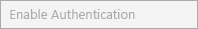
<style>
.page{position:relative;width:198px;height:29px;background:#f4f4f4}
.page>*{position:absolute;margin:0}
.t1{font:13px "SegoeUI";color:#acacac}
</style>
<div class="page">
<p class="t1" style="left:10px;top:9px;width:125px;height:10px">Enable Authentication</p>
</div>
